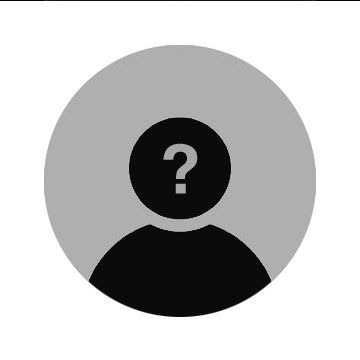
<style>
.page{position:relative;width:360px;height:360px;background:#ffffff}
.page>*{position:absolute;margin:0}
.t1{font:68.7px "Helvetica-Bold";color:#a7a7a7}
</style>
<div class="page">
<p class="t1" style="left:163px;top:142px;width:35px;height:51px">?</p>
</div>
